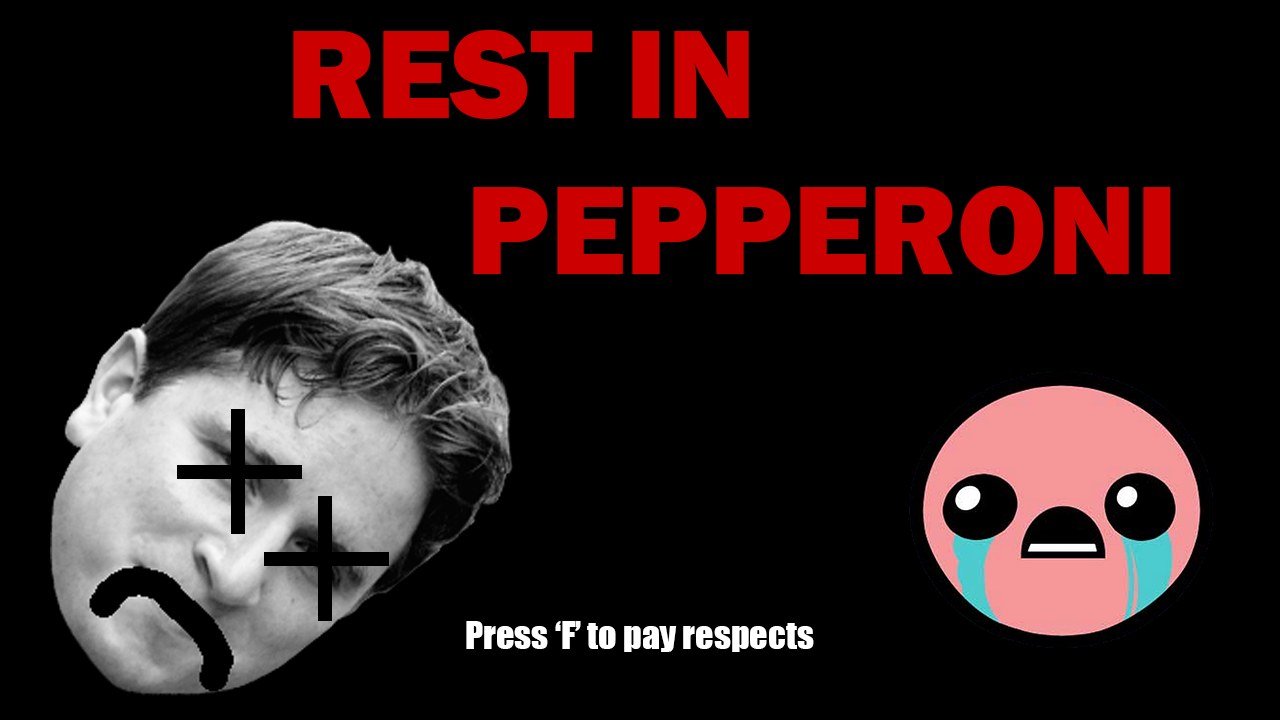
<style>
.page{position:relative;width:1280px;height:720px;background:#000000}
.page>*{position:absolute;margin:0}
.t1{font:130px "FranklinGothic-Heavy";color:#cd0000}
.t2{font:36px "Impact";color:#ffffff}
</style>
<div class="page">
<p class="t1" style="left:293px;top:30px;width:878px;height:245px">REST IN <br>     PEPPERONI</p>
<p class="t2" style="left:466px;top:621px;width:348px;height:31px">Press ‘F’ to pay respects</p>
</div>
